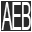
<style>
.page{position:relative;width:32px;height:32px;background:#292929}
.page>*{position:absolute;margin:0}
.t1{font:39px "ArialMT";letter-spacing:-0.05em;color:#ffffff;scale:0.4 1}
</style>
<div class="page">
<p class="t1" style="left:1px;top:2px;width:30px;height:28px">AEB</p>
</div>
